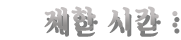
<style>
.page{position:relative;width:181px;height:40px;background:#ffffff}
.page>*{position:absolute;margin:0}
.t1{font:26.9px "SDKukdetopokki-bBd";letter-spacing:0.08em}
</style>
<div class="page">
<p class="t1" style="left:44px;top:6px;width:134px;height:25px">제한 시간 :</p>
</div>
